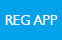
<style>
.page{position:relative;width:62px;height:40px;background:#00a2e9}
.page>*{position:absolute;margin:0}
.t1{font:13.9px "Humanist521BT-Roman";color:#fefefe}
</style>
<div class="page">
<p class="t1" style="left:5px;top:15px;width:53px;height:10px">REG APP</p>
</div>
